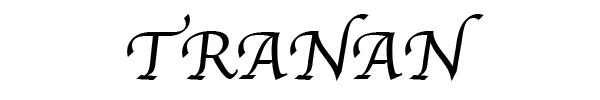
<style>
.page{position:relative;width:600px;height:100px;background:#ffffff}
.page>*{position:absolute;margin:0}
.t1{font:72px "Apple-Chancery";color:#000000}
</style>
<div class="page">
<p class="t1" style="left:127px;top:14px;width:357px;height:67px">TRANAN</p>
</div>
